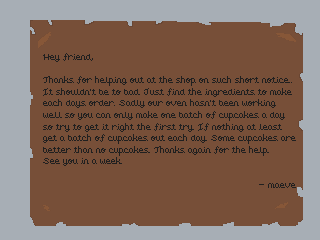
<style>
.page{position:relative;width:320px;height:240px;background:#774f38}
.page>*{position:absolute;margin:0}
.t1{font:8px "untitled-regular";color:#202020}
</style>
<div class="page">
<p class="t1" style="left:43px;top:53px;width:253px;height:135px">Hey friend,<br><br>Thanks for helping out at the shop on such short notice..<br>It shouldn't be to bad. Just find the ingredients to make<br>each days order. Sadly our oven hasn't been working<br>well so you can only make one batch of cupcakes a day <br>so try to get it right the first try. If nothing at least<br>get a batch of cupcakes out each day. Some cupcakes are<br>better than no cupcakes. Thanks again for the help.<br>See you in a week.<br><br>      - maeve</p>
</div>
